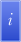
<style>
.page{position:relative;width:21px;height:42px}
.page>*{position:absolute;margin:0}
.t1{font:18px "Baskerville-Italic";color:#ffffff}
</style>
<div class="page">
<p class="t1" style="left:8px;top:13px;width:5px;height:13px">i</p>
</div>
